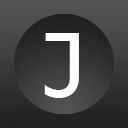
<style>
.page{position:relative;width:128px;height:128px}
.page>*{position:absolute;margin:0}
.t1{font:100px "Consolas";color:#ffffff}
</style>
<div class="page">
<p class="t1" style="left:44px;top:33px;width:35px;height:65px">J</p>
</div>
